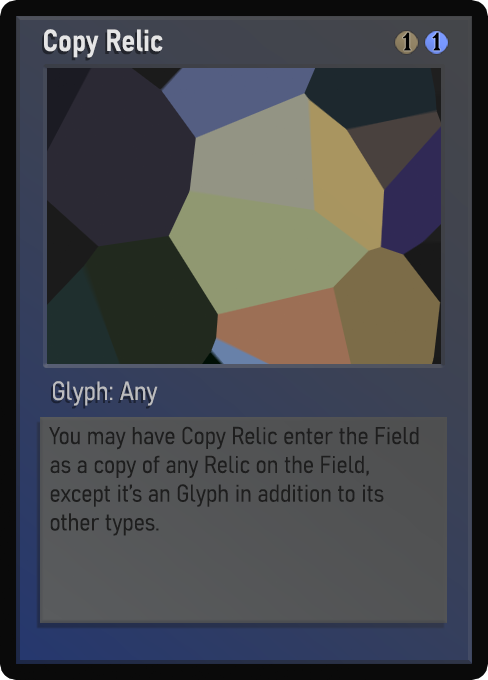
<style>
.page{position:relative;width:488px;height:680px}
.page>*{position:absolute;margin:0}
.t1{font:30px "Bahnschrift-SemiBoldSemiCondensed";color:#f2f2f2;font-weight:bold}
.t2{font:25px "WTRRoycroft";color:#000000;font-weight:bold;scale:1.09 1}
.t3{font:26px "Bahnschrift-LightSemiCondensed";color:#c8c8c8;font-weight:bold}
.t4{font:24px "Bahnschrift-LightSemiCondensed";color:#1e1e1e;font-weight:bold}
</style>
<div class="page">
<p class="t1" style="left:44px;top:29px;width:119px;height:29px;opacity:0.9">Copy Relic</p>
<p class="t2" style="left:403px;top:32px;width:8px;height:19px">1</p>
<p class="t2" style="left:432px;top:32px;width:9px;height:19px">1</p>
<p class="t3" style="left:53px;top:381px;width:105px;height:25px;opacity:0.9">Glyph: Any</p>
<p class="t4" style="left:49px;top:426px;width:370px;height:110px">You may have Copy Relic enter the Field as a copy of any Relic on the Field, except it’s an Glyph in addition to its other types.</p>
</div>
